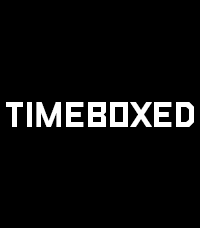
<style>
.page{position:relative;width:200px;height:228px;background:#000000}
.page>*{position:absolute;margin:0}
.t1{font:35.1px "LECO1976-Regular";color:#ffffff}
</style>
<div class="page">
<p class="t1" style="left:6px;top:102px;width:188px;height:25px">TIMEBOXED</p>
</div>
